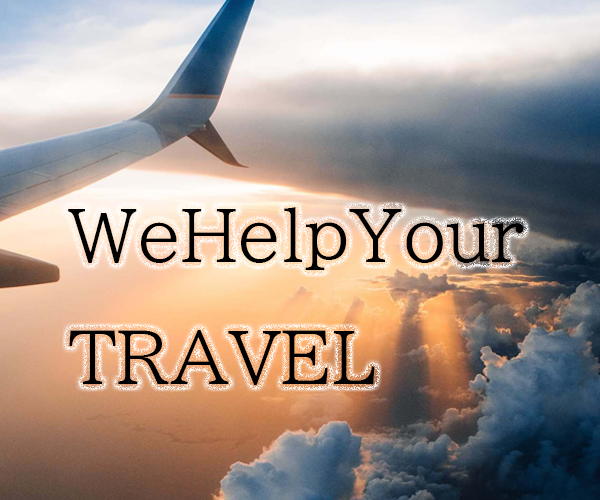
<style>
.page{position:relative;width:600px;height:500px}
.page>*{position:absolute;margin:0}
.t1{font:70px "BIZ-UDPMincho-Medium";color:#000000}
</style>
<div class="page">
<p class="t1" style="left:68px;top:207px;width:456px;height:178px">WeHelpYour TRAVEL</p>
</div>
